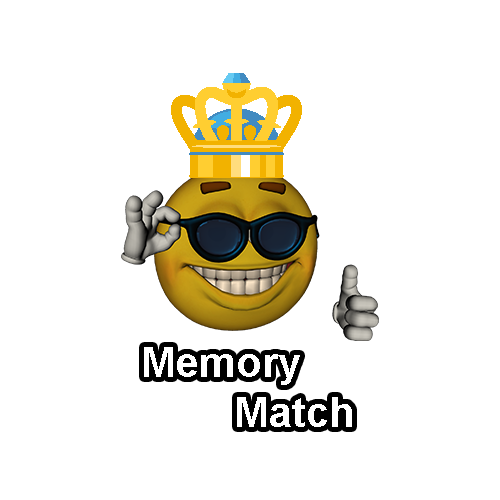
<style>
.page{position:relative;width:500px;height:500px;background:#ffffff}
.page>*{position:absolute;margin:0}
.t1{font:41.7px "Arial-BoldMT";color:#ffffff}
</style>
<div class="page">
<p class="t1" style="left:144px;top:347px;width:208px;height:80px">Memory <br>        Match</p>
</div>
